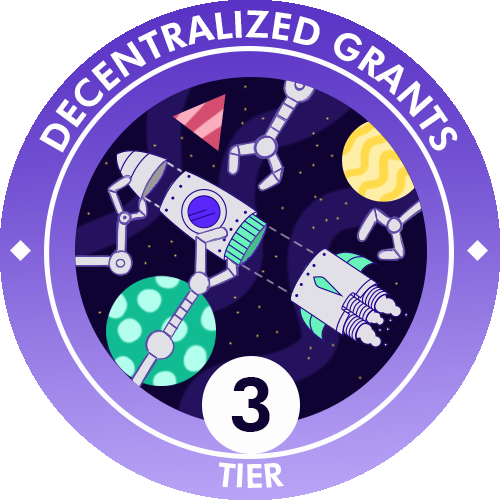
<style>
.page{position:relative;width:500px;height:500px;background:#ffffff}
.page>*{position:absolute;margin:0}
.t1{font:37.5px "FuturaBT-Heavy";color:#ffffff}
.t2{font:75px "FuturaBT-Heavy";color:#0e0333}
.t3{font:33.3px "FuturaBT-Heavy";color:#ffffff}
</style>
<div class="page">
<p class="t1" style="left:39px;top:10px;width:419px;height:143px;text-align:center">DECENTRALIZED GRANTS</p>
<p class="t2" style="left:231px;top:377px;width:39px;height:55px">3</p>
<p class="t3" style="left:219px;top:462px;width:65px;height:26px">TIER</p>
</div>
